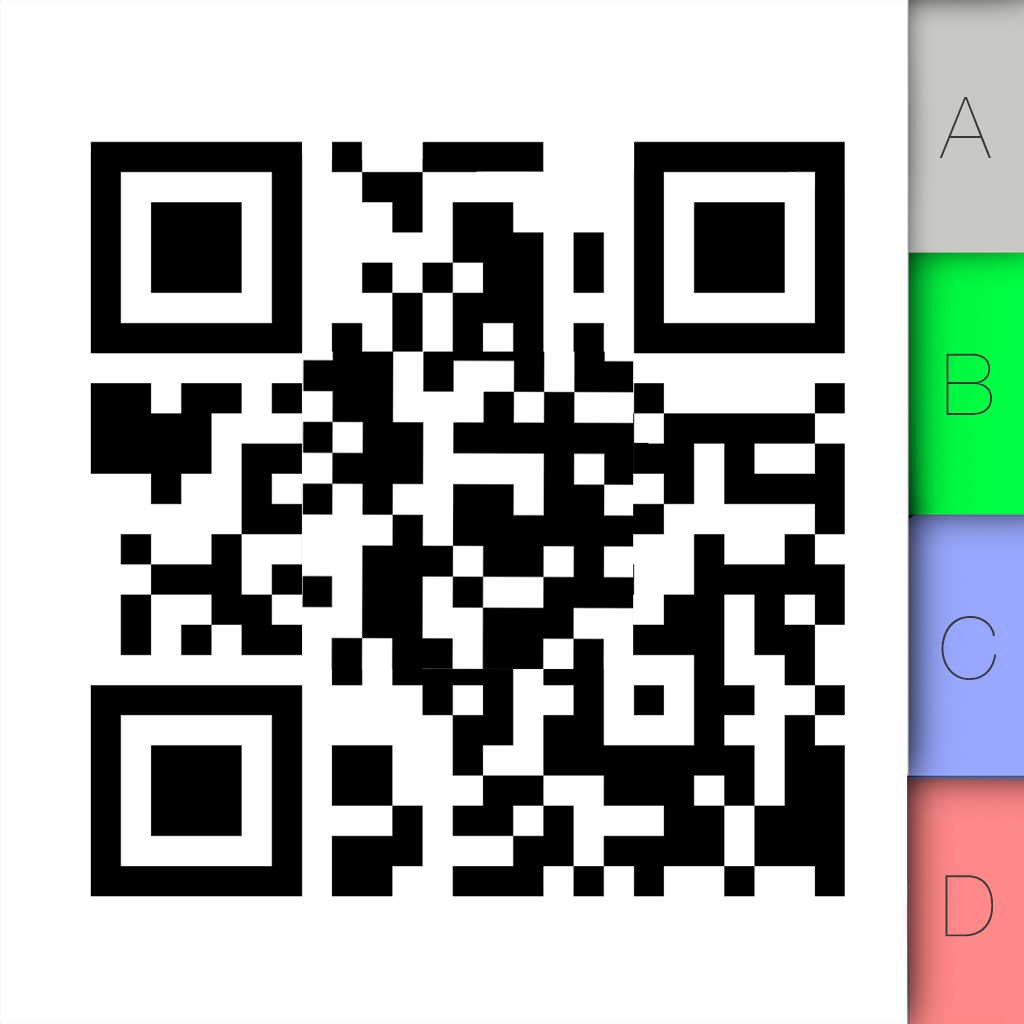
<style>
.page{position:relative;width:1024px;height:1024px;background:#ffffff}
.page>*{position:absolute;margin:0}
.t1{font:85.3px "HelveticaNeue-UltraLight";color:#393939}
</style>
<div class="page">
<p class="t1" style="left:939px;top:97px;width:52px;height:61px">A</p>
<p class="t1" style="left:946px;top:353px;width:46px;height:62px">B</p>
<p class="t1" style="left:941px;top:616px;width:56px;height:64px">C</p>
<p class="t1" style="left:945px;top:875px;width:48px;height:62px">D</p>
</div>
